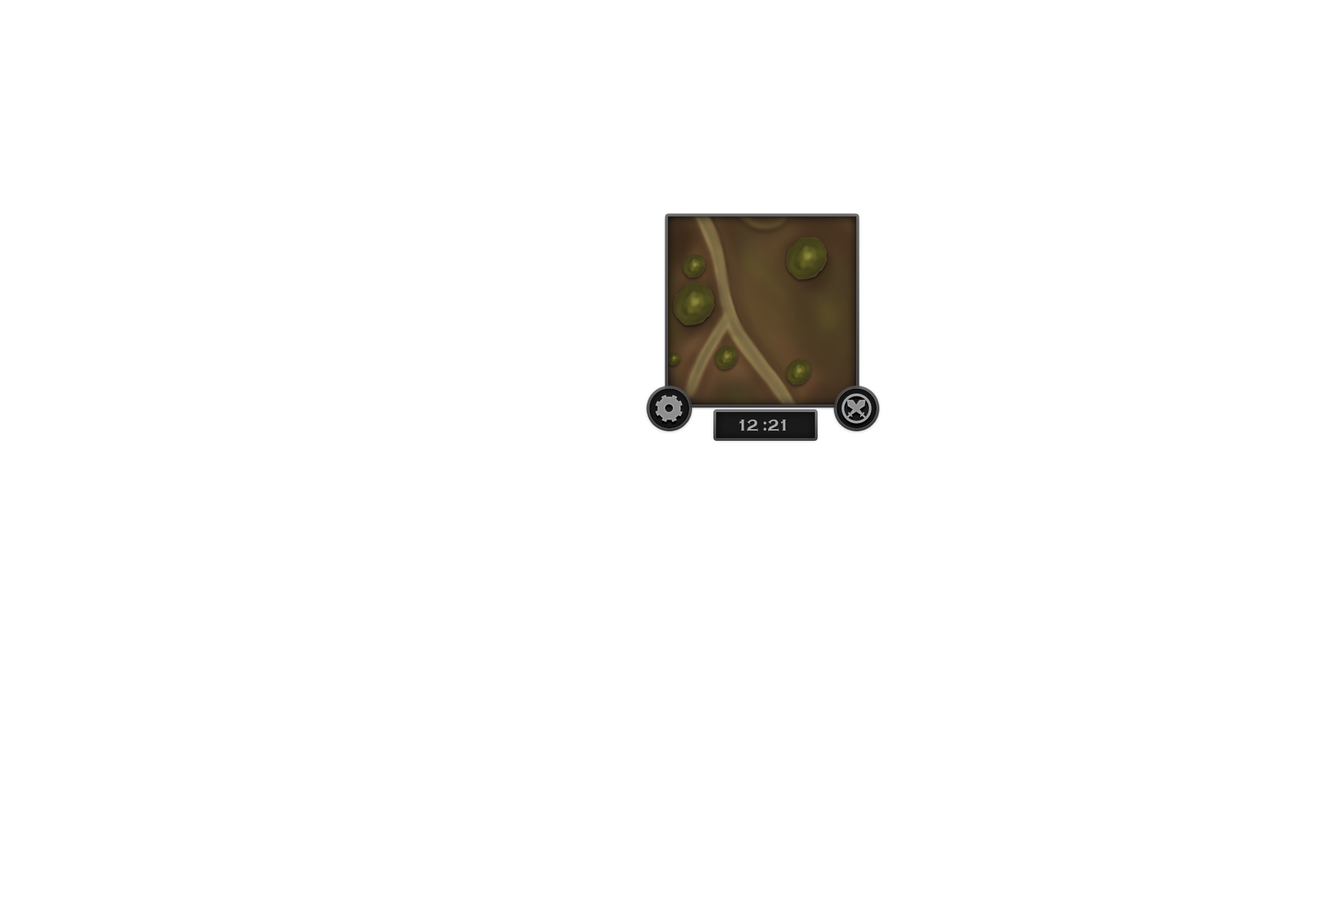
<style>
.page{position:relative;width:1317px;height:905px;background:#ffffff}
.page>*{position:absolute;margin:0}
.t1{font:16.5px "CopperplateGothic-Bold";color:#aaaaaa;font-variant:small-caps}
</style>
<div class="page">
<p class="t1" style="left:739px;top:420px;width:47px;height:11px">12 :21</p>
</div>
